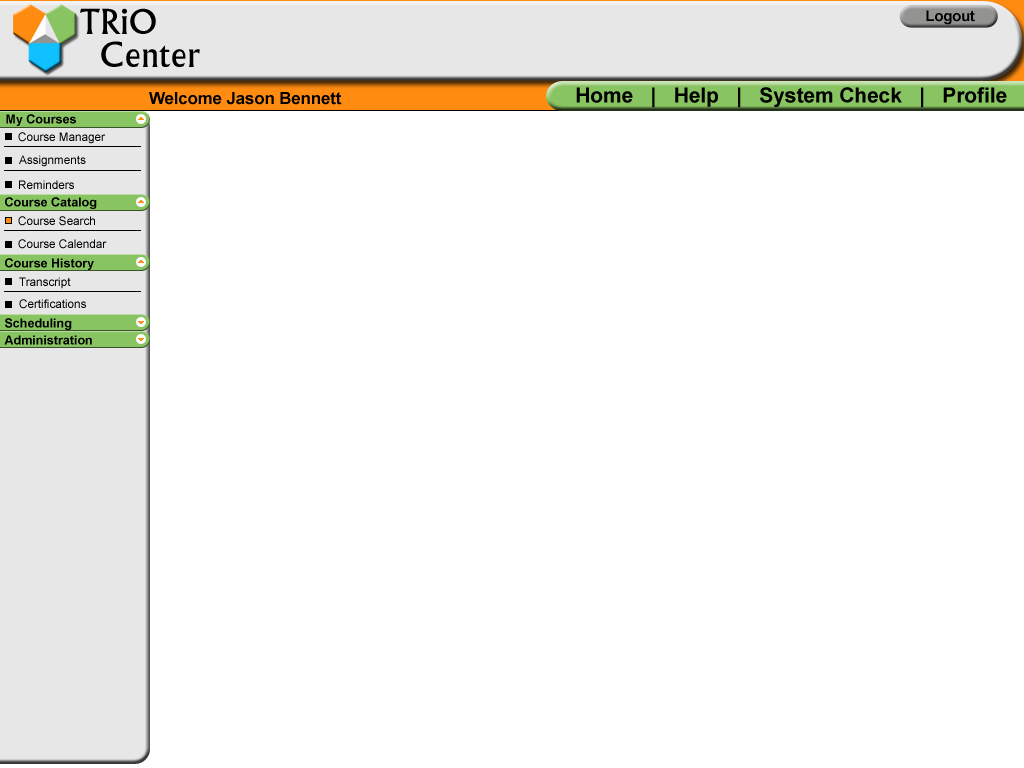
<style>
.page{position:relative;width:1024px;height:768px;background:#ffffff}
.page>*{position:absolute;margin:0}
.t1{font:33.3px/33.3px "Flair-Normal";color:#000000}
.t2{font:14.6px "Arial-BoldMT";color:#000000}
.t3{font:20.8px "Arial-BoldMT";color:#000000}
.t4{font:16.7px "Arial-BoldMT";color:#000000}
.t5{font:12.5px "Arial-BoldMT";color:#000000}
.t6{font:11.7px "ArialMT";color:#000000}
</style>
<div class="page">
<p class="t1" style="left:80px;top:8px;width:120px;height:59px">TRiO<br>  Center</p>
<p class="t2" style="left:926px;top:10px;width:49px;height:15px">Logout</p>
<p class="t3" style="left:576px;top:87px;width:431px;height:21px">Home   |   Help   |   System Check   |   Profile</p>
<p class="t4" style="left:149px;top:92px;width:193px;height:13px">Welcome Jason Bennett</p>
<p class="t5" style="left:6px;top:114px;width:70px;height:12px">My Courses</p>
<p class="t6" style="left:18px;top:132px;width:88px;height:12px">Course Manager</p>
<p class="t6" style="left:19px;top:155px;width:67px;height:12px">Assignments</p>
<p class="t6" style="left:19px;top:180px;width:55px;height:9px">Reminders</p>
<p class="t5" style="left:5px;top:197px;width:92px;height:12px">Course Catalog</p>
<p class="t6" style="left:18px;top:216px;width:77px;height:10px">Course Search</p>
<p class="t6" style="left:18px;top:239px;width:89px;height:10px">Course Calendar</p>
<p class="t5" style="left:5px;top:258px;width:89px;height:12px">Course History</p>
<p class="t6" style="left:19px;top:277px;width:52px;height:12px">Transcript</p>
<p class="t6" style="left:19px;top:299px;width:67px;height:10px">Certifications</p>
<p class="t5" style="left:5px;top:318px;width:67px;height:12px">Scheduling</p>
<p class="t5" style="left:4px;top:335px;width:88px;height:10px">Administration</p>
</div>
